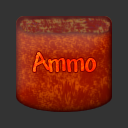
<style>
.page{position:relative;width:128px;height:128px;background:#333333}
.page>*{position:absolute;margin:0}
.t1{font:30px "Andy-Bold";letter-spacing:-0.05em}
</style>
<div class="page">
<p class="t1" style="left:32px;top:52px;width:64px;height:20px">Ammo</p>
</div>
